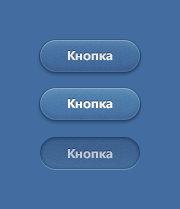
<style>
.page{position:relative;width:180px;height:209px;background:#436da0}
.page>*{position:absolute;margin:0}
.t1{font:13px "SegoeUI-Bold";color:#ececec}
.t2{font:13px "SegoeUI-Bold";color:#ffffff}
.t3{font:13px "SegoeUI-Bold";color:#c2cbd8}
</style>
<div class="page">
<p class="t1" style="left:68px;top:51px;width:45px;height:10px">Кнопка</p>
<p class="t2" style="left:68px;top:99px;width:45px;height:10px">Кнопка</p>
<p class="t3" style="left:68px;top:149px;width:45px;height:10px">Кнопка</p>
</div>
